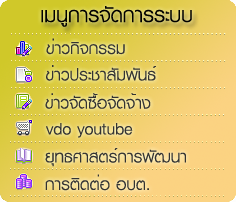
<style>
.page{position:relative;width:236px;height:202px}
.page>*{position:absolute;margin:0}
.t1{font:30px "KittithadaLight45F";color:#000000}
.t2{font:24px "KittithadaLight45F";color:#333333}
</style>
<div class="page">
<p class="t1" style="left:41px;top:6px;width:151px;height:21px">เมนูการจัดการระบบ</p>
<p class="t2" style="left:46px;top:38px;width:79px;height:17px">ข่าวกิจกรรม</p>
<p class="t2" style="left:46px;top:65px;width:110px;height:16px">ข่าวประชาสัมพันธ์</p>
<p class="t2" style="left:45px;top:93px;width:106px;height:16px">ข่าวจัดซื้อจัดจ้าง</p>
<p class="t2" style="left:46px;top:123px;width:87px;height:15px">vdo youtube</p>
<p class="t2" style="left:45px;top:148px;width:141px;height:19px">ยุทธศาสตร์การพัฒนา</p>
<p class="t2" style="left:45px;top:174px;width:104px;height:17px">การติดต่อ อบต.</p>
</div>
